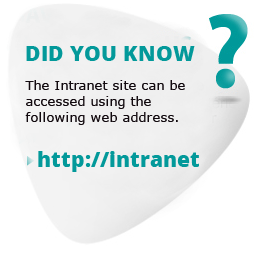
<style>
.page{position:relative;width:262px;height:254px;background:#ffffff}
.page>*{position:absolute;margin:0}
.t1{font:21.3px "OpenSans-Extrabold";color:#03999a}
.t2{font:13.3px "MSReferenceSansSerif";color:#120a0f}
</style>
<div class="page">
<p class="t1" style="left:26px;top:46px;width:169px;height:15px">DID YOU KNOW</p>
<p class="t2" style="left:25px;top:80px;width:160px;height:45px">The Intranet site can be accessed using the following web address.</p>
<p class="t1" style="left:38px;top:151px;width:161px;height:21px">http://intranet</p>
</div>
